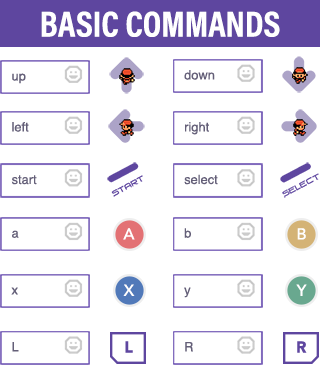
<style>
.page{position:relative;width:320px;height:381px;background:#ffffff}
.page>*{position:absolute;margin:0}
.t1{font:36.3px "AcuminProCond-Bold";color:#ffffff;text-transform:uppercase}
.t2{font:12.9px "Helvetica";color:#645f78}
.t3{font:15.8px "Avenir-Medium";color:#ffffff}
.t4{font:15.8px "Avenir-Black";color:#5e469f}
</style>
<div class="page">
<p class="t1" style="left:41px;top:11px;width:239px;height:26px">Basic Commands</p>
<p class="t2" style="left:12px;top:73px;width:14px;height:11px">up</p>
<p class="t2" style="left:184px;top:70px;width:31px;height:10px">down</p>
<p class="t2" style="left:12px;top:122px;width:17px;height:10px">left</p>
<p class="t2" style="left:185px;top:122px;width:24px;height:13px">right</p>
<p class="t2" style="left:184px;top:174px;width:34px;height:11px">select</p>
<p class="t2" style="left:11px;top:175px;width:26px;height:10px">start</p>
<p class="t2" style="left:12px;top:230px;width:7px;height:8px">a</p>
<p class="t3" style="left:123px;top:228px;width:12px;height:12px">A</p>
<p class="t2" style="left:184px;top:228px;width:7px;height:10px">b</p>
<p class="t3" style="left:297px;top:228px;width:9px;height:12px">B</p>
<p class="t2" style="left:11px;top:287px;width:7px;height:8px">x</p>
<p class="t3" style="left:123px;top:284px;width:12px;height:12px">X</p>
<p class="t2" style="left:184px;top:287px;width:7px;height:11px">y</p>
<p class="t3" style="left:296px;top:284px;width:11px;height:12px">Y</p>
<p class="t2" style="left:12px;top:342px;width:7px;height:10px">L</p>
<p class="t4" style="left:125px;top:341px;width:8px;height:12px">L</p>
<p class="t2" style="left:185px;top:342px;width:8px;height:10px">R</p>
<p class="t4" style="left:297px;top:341px;width:10px;height:12px">R</p>
</div>
